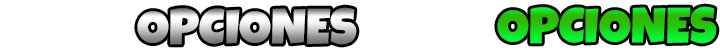
<style>
.page{position:relative;width:720px;height:50px;background:#ffffff}
.page>*{position:absolute;margin:0}
.t1{font:50px "LuckiestGuy-Regular"}
</style>
<div class="page">
<p class="t1" style="left:497px;top:6px;width:220px;height:38px">OPCIONES</p>
<p class="t1" style="left:137px;top:7px;width:220px;height:38px">OPCIONES</p>
</div>
